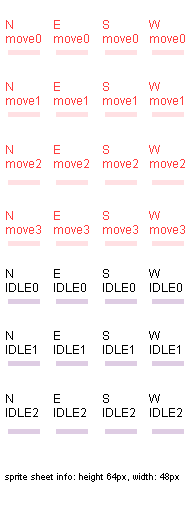
<style>
.page{position:relative;width:192px;height:512px;background:#ffffff}
.page>*{position:absolute;margin:0}
.t1{font:12px "ArialMT";color:#ff3d3d}
.t2{font:12px "ArialMT";color:#000000}
.t3{font:9px "ArialMT";color:#000000}
</style>
<div class="page">
<p class="t1" style="left:6px;top:20px;width:35px;height:23px">N<br>move0</p>
<p class="t1" style="left:54px;top:20px;width:35px;height:23px">E<br>move0</p>
<p class="t1" style="left:103px;top:20px;width:35px;height:23px">S<br>move0</p>
<p class="t1" style="left:149px;top:20px;width:36px;height:23px">W<br>move0</p>
<p class="t1" style="left:6px;top:82px;width:33px;height:23px">N<br>move1</p>
<p class="t1" style="left:54px;top:82px;width:33px;height:23px">E<br>move1</p>
<p class="t1" style="left:103px;top:82px;width:33px;height:23px">S<br>move1</p>
<p class="t1" style="left:149px;top:82px;width:34px;height:23px">W<br>move1</p>
<p class="t1" style="left:6px;top:145px;width:35px;height:23px">N<br>move2</p>
<p class="t1" style="left:54px;top:145px;width:35px;height:23px">E<br>move2</p>
<p class="t1" style="left:103px;top:145px;width:35px;height:23px">S<br>move2</p>
<p class="t1" style="left:149px;top:145px;width:36px;height:23px">W<br>move2</p>
<p class="t1" style="left:6px;top:211px;width:35px;height:23px">N<br>move3</p>
<p class="t1" style="left:54px;top:211px;width:35px;height:23px">E<br>move3</p>
<p class="t1" style="left:103px;top:211px;width:35px;height:23px">S<br>move3</p>
<p class="t1" style="left:149px;top:211px;width:36px;height:23px">W<br>move3</p>
<p class="t2" style="left:6px;top:269px;width:32px;height:23px">N<br>IDLE0</p>
<p class="t2" style="left:54px;top:269px;width:32px;height:23px">E<br>IDLE0</p>
<p class="t2" style="left:103px;top:269px;width:32px;height:23px">S<br>IDLE0</p>
<p class="t2" style="left:149px;top:269px;width:33px;height:23px">W<br>IDLE0</p>
<p class="t2" style="left:6px;top:331px;width:30px;height:23px">N<br>IDLE1</p>
<p class="t2" style="left:54px;top:331px;width:30px;height:23px">E<br>IDLE1</p>
<p class="t2" style="left:103px;top:331px;width:30px;height:23px">S<br>IDLE1</p>
<p class="t2" style="left:149px;top:331px;width:31px;height:23px">W<br>IDLE1</p>
<p class="t2" style="left:6px;top:394px;width:32px;height:23px">N<br>IDLE2</p>
<p class="t2" style="left:54px;top:394px;width:32px;height:23px">E<br>IDLE2</p>
<p class="t2" style="left:103px;top:394px;width:32px;height:23px">S<br>IDLE2</p>
<p class="t2" style="left:149px;top:394px;width:33px;height:23px">W<br>IDLE2</p>
<p class="t3" style="left:5px;top:473px;width:174px;height:9px">sprite sheet info: height 64px, width: 48px</p>
</div>
